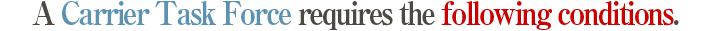
<style>
.page{position:relative;width:712px;height:31px;background:#ffffff}
.page>*{position:absolute;margin:0}
.t1{font:32px "RyuminPro-ExBold";letter-spacing:-0.08em;color:#cb0000;scale:0.9 1}
.t2{font:32px "RyuminPro-ExBold";letter-spacing:-0.08em;color:#4c4842;scale:0.9 1}
.t3{font:32px "RyuminPro-ExBold";letter-spacing:-0.08em;color:#5b92b2;scale:0.9 1}
</style>
<div class="page">
<p class="t1" style="left:32px;top:1px;width:647px;height:29px"><span class="t2">A </span><span class="t3">Carrier Task Force</span><span class="t2"> requires the </span>following conditions<span class="t2">.</span></p>
</div>
